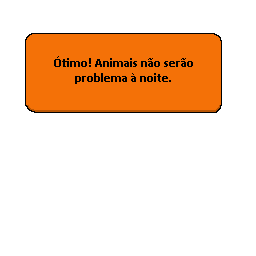
<style>
.page{position:relative;width:256px;height:256px;background:#ffffff}
.page>*{position:absolute;margin:0}
.t1{font:12.5px "Calibri-Bold";color:#000000}
</style>
<div class="page">
<p class="t1" style="left:54px;top:56px;width:139px;height:28px;text-align:center">Ótimo! Animais não serão problema à noite.</p>
</div>
